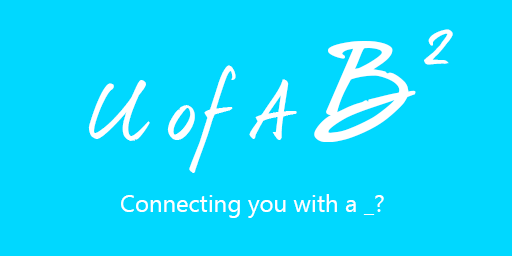
<style>
.page{position:relative;width:512px;height:256px;background:#00d8ff}
.page>*{position:absolute;margin:0}
.t1{font:58.8px "dearJoe6TRIAL";color:#ffffff}
.t2{font:72px "dearJoe6TRIAL";color:#ffffff}
.t3{font:120px "dearJoe6TRIAL";color:#ffffff}
.t4{font:24px "SegoeUI";color:#ffffff}
</style>
<div class="page">
<p class="t1" style="left:424px;top:29px;width:29px;height:36px">2</p>
<p class="t2" style="left:88px;top:41px;width:328px;height:132px">U of A <span class="t3">B</span></p>
<p class="t4" style="left:121px;top:194px;width:263px;height:24px">Connecting you with a _?</p>
</div>
